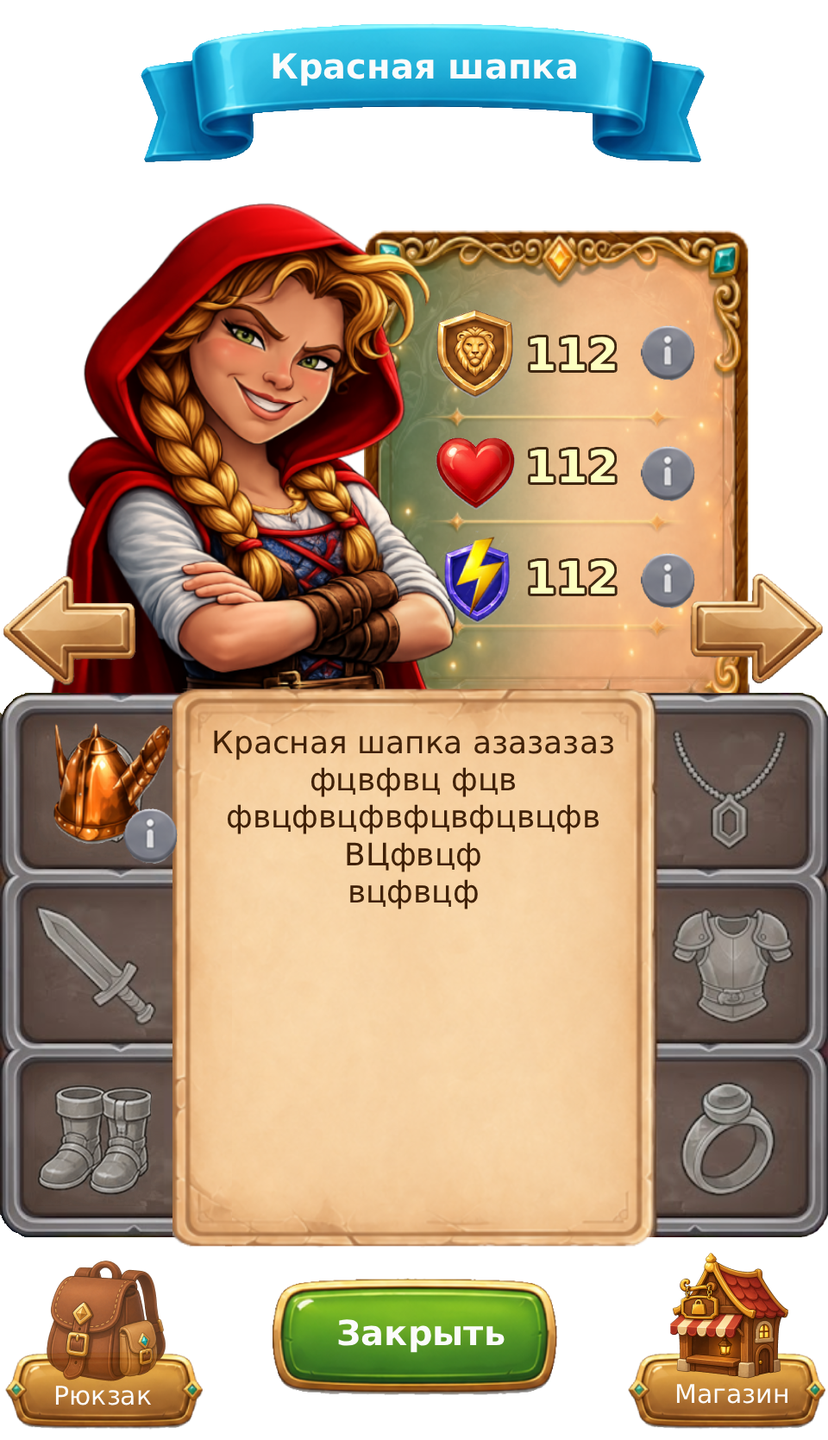
<style>
.page{position:relative;width:828px;height:1440px;background:#ffffff}
.page>*{position:absolute;margin:0}
.t1{font:34.5px "DejaVuSans-Bold";color:#fbfbfb}
.t2{font:44.9px "DejaVuSans-Bold";color:#fdffc0}
.t3{font:31.1px "DejaVuSans";color:#402108}
.t4{font:25.9px "DejaVuSans";color:#fbfbfb}
</style>
<div class="page">
<p class="t1" style="left:273px;top:53px;width:303px;height:33px">Красная шапка</p>
<p class="t2" style="left:530px;top:336px;width:85px;height:34px">112</p>
<p class="t2" style="left:530px;top:449px;width:85px;height:33px">112</p>
<p class="t2" style="left:530px;top:560px;width:85px;height:34px">112</p>
<p class="t3" style="left:214px;top:730px;width:400px;height:179px;text-align:center">Красная шапка азазазаз<br>фцвфвц фцв<br>фвцфвцфвфцвфцвцфв<br>ВЦфвцф<br>вцфвцф</p>
<p class="t1" style="left:338px;top:1319px;width:167px;height:34px">Закрыть</p>
<p class="t4" style="left:55px;top:1385px;width:97px;height:20px">Рюкзак</p>
<p class="t4" style="left:676px;top:1384px;width:112px;height:20px">Магазин</p>
</div>
